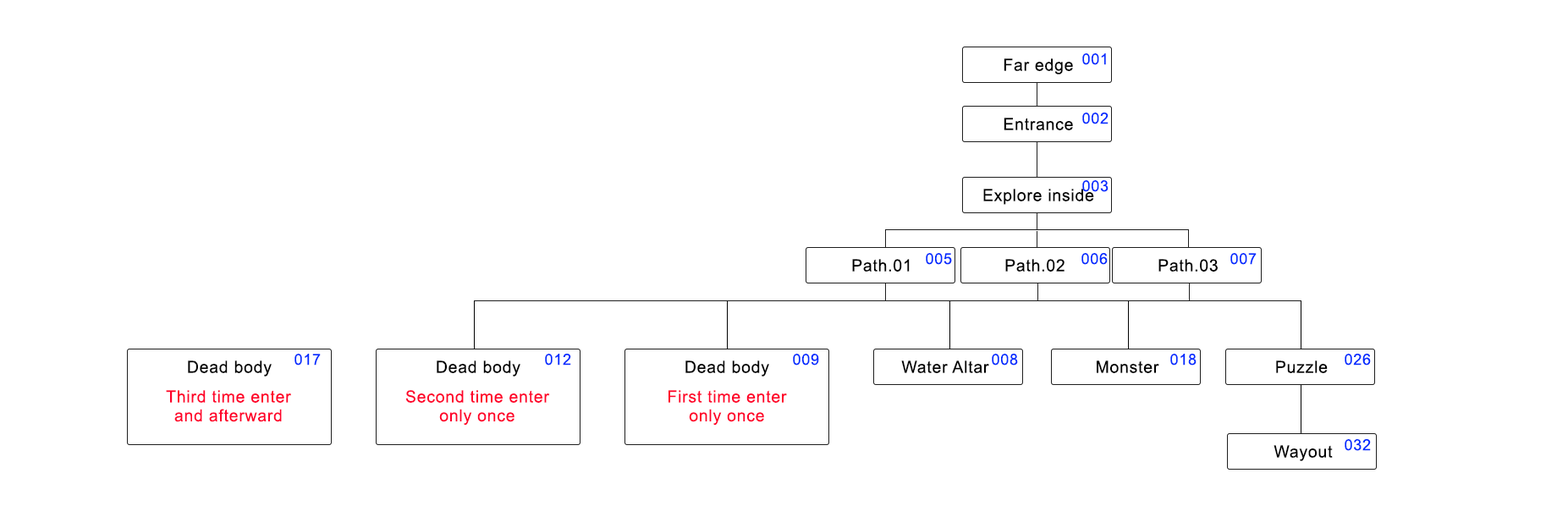
<style>
.page{position:relative;width:1568px;height:528px;background:#ffffff}
.page>*{position:absolute;margin:0}
.t1{font:15.2px "ArialMT";letter-spacing:0.04em;color:#002bff}
.t2{font:16.6px "ArialMT";letter-spacing:0.04em;color:#000000}
.t3{font:16.6px/18.9px "ArialMT";letter-spacing:0.04em;color:#ff002a}
</style>
<div class="page">
<p class="t1" style="left:1082px;top:53px;width:24px;height:12px">001</p>
<p class="t2" style="left:1004px;top:58px;width:69px;height:16px">Far edge</p>
<p class="t1" style="left:1082px;top:113px;width:27px;height:11px">002</p>
<p class="t2" style="left:1004px;top:118px;width:69px;height:12px">Entrance</p>
<p class="t1" style="left:1082px;top:180px;width:27px;height:12px">003</p>
<p class="t2" style="left:983px;top:189px;width:111px;height:16px">Explore inside</p>
<p class="t1" style="left:926px;top:253px;width:26px;height:12px">005</p>
<p class="t1" style="left:1081px;top:253px;width:27px;height:12px">006</p>
<p class="t1" style="left:1230px;top:253px;width:27px;height:12px">007</p>
<p class="t2" style="left:852px;top:259px;width:58px;height:13px">Path.01</p>
<p class="t2" style="left:1005px;top:259px;width:60px;height:13px">Path.02</p>
<p class="t2" style="left:1158px;top:259px;width:60px;height:13px">Path.03</p>
<p class="t1" style="left:294px;top:354px;width:27px;height:12px">017</p>
<p class="t1" style="left:545px;top:354px;width:26px;height:12px">012</p>
<p class="t1" style="left:793px;top:354px;width:26px;height:12px">009</p>
<p class="t1" style="left:992px;top:354px;width:26px;height:12px">008</p>
<p class="t1" style="left:1170px;top:354px;width:27px;height:12px">018</p>
<p class="t1" style="left:1345px;top:354px;width:26px;height:12px">026</p>
<p class="t2" style="left:188px;top:360px;width:84px;height:17px">Dead body</p>
<p class="t2" style="left:437px;top:360px;width:83px;height:17px">Dead body</p>
<p class="t2" style="left:685px;top:360px;width:84px;height:17px">Dead body</p>
<p class="t2" style="left:901px;top:360px;width:88px;height:13px">Water Altar</p>
<p class="t2" style="left:1097px;top:360px;width:62px;height:13px">Monster</p>
<p class="t2" style="left:1276px;top:360px;width:52px;height:13px">Puzzle</p>
<p class="t3" style="left:166px;top:390px;width:125px;height:32px;text-align:center">Third time enter<br>and afterward</p>
<p class="t3" style="left:405px;top:390px;width:145px;height:36px;text-align:center">Second time enter<br>only once</p>
<p class="t3" style="left:668px;top:390px;width:119px;height:36px;text-align:center">First time enter<br>only once</p>
<p class="t2" style="left:1274px;top:445px;width:59px;height:16px">Wayout</p>
<p class="t1" style="left:1345px;top:439px;width:26px;height:12px">032</p>
</div>
